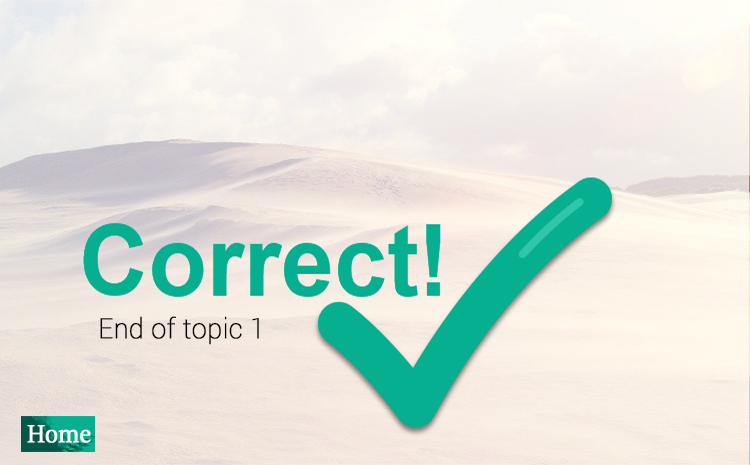
<style>
.page{position:relative;width:750px;height:465px}
.page>*{position:absolute;margin:0}
.t1{font:27.7px "Roboto-Thin";color:#000000;font-weight:bold;scale:0.96 1}
.t2{font:27.7px "SitkaBanner";color:#ffffff;font-weight:bold;scale:0.96 1}
</style>
<div class="page">
<p class="t1" style="left:100px;top:316px;width:159px;height:29px">End of topic 1</p>
<p class="t2" style="left:27px;top:425px;width:64px;height:18px">Home</p>
</div>
